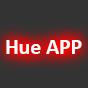
<style>
.page{position:relative;width:88px;height:88px;background:#333333}
.page>*{position:absolute;margin:0}
.t1{font:21.6px "Calibri-Bold";color:#ffffff}
</style>
<div class="page">
<p class="t1" style="left:6px;top:40px;width:76px;height:14px">Hue APP</p>
</div>
